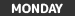
<style>
.page{position:relative;width:75px;height:16px;background:#333333}
.page>*{position:absolute;margin:0}
.t1{font:12.5px "RoundedMplus1c-ExtraBold";color:#ffffff}
</style>
<div class="page">
<p class="t1" style="left:11px;top:3px;width:52px;height:11px">MONDAY</p>
</div>
